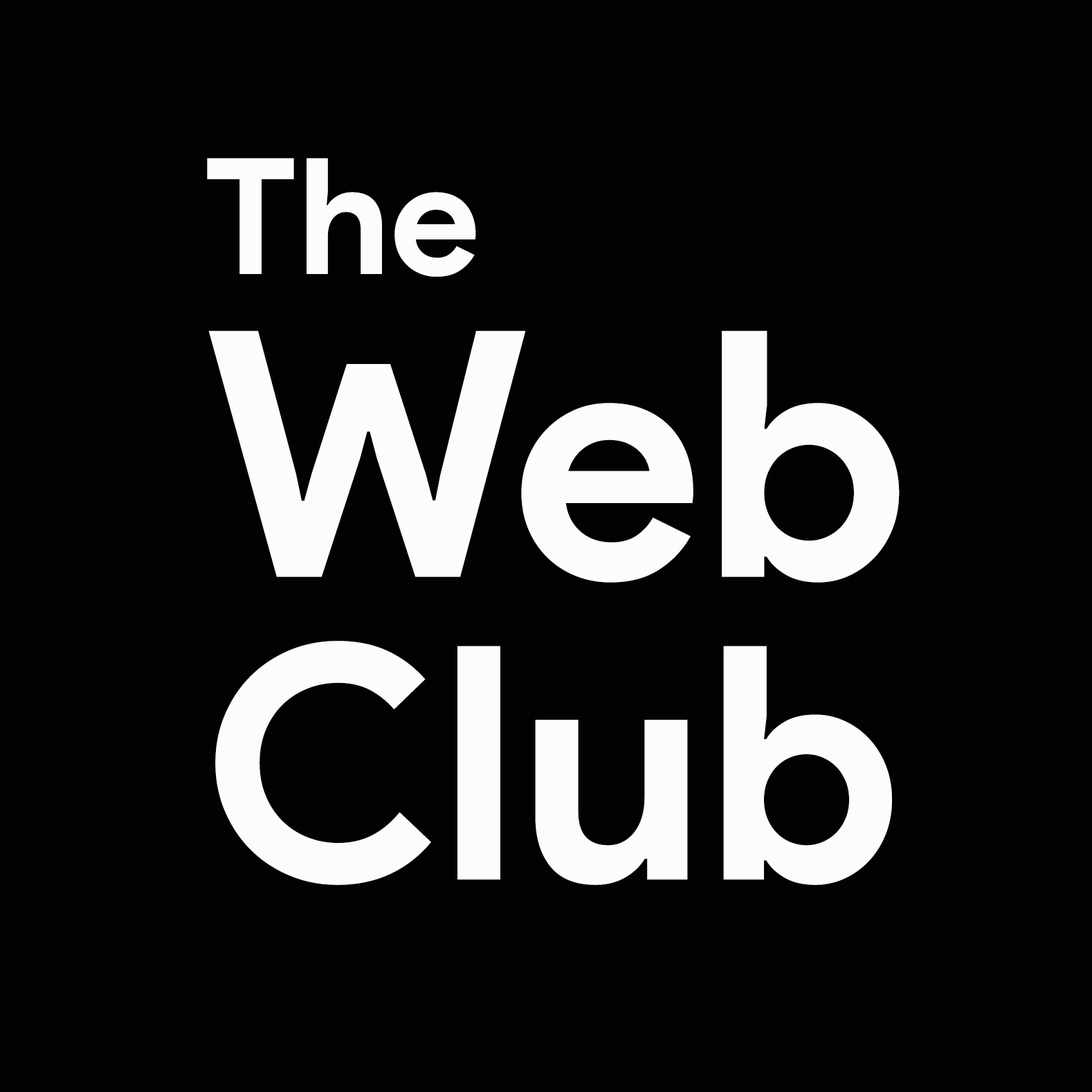
<style>
.page{position:relative;width:1092px;height:1092px;background:#030202}
.page>*{position:absolute;margin:0}
.t1{font:325.8px/302.8px "ProductSans-Bold";color:#fdfcfc}
.t2{font:161.5px/302.8px "ProductSans-Bold";color:#fdfcfc}
.t3{font:343.1px/302.8px "ProductSans-Bold";color:#fdfcfc}
</style>
<div class="page">
<p class="t1" style="left:207px;top:158px;width:693px;height:727px"><span class="t2">The<br></span><span class="t3">Web<br></span>Club</p>
</div>
